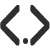
<style>
.page{position:relative;width:50px;height:50px;background:#ffffff}
.page>*{position:absolute;margin:0}
.t1{font:112.5px "FanwoodText";color:#2f2f2f;font-weight:bold;scale:0.35 1}
</style>
<div class="page">
<p class="t1" style="left:0px;top:5px;width:50px;height:41px">&lt; &gt;</p>
</div>
